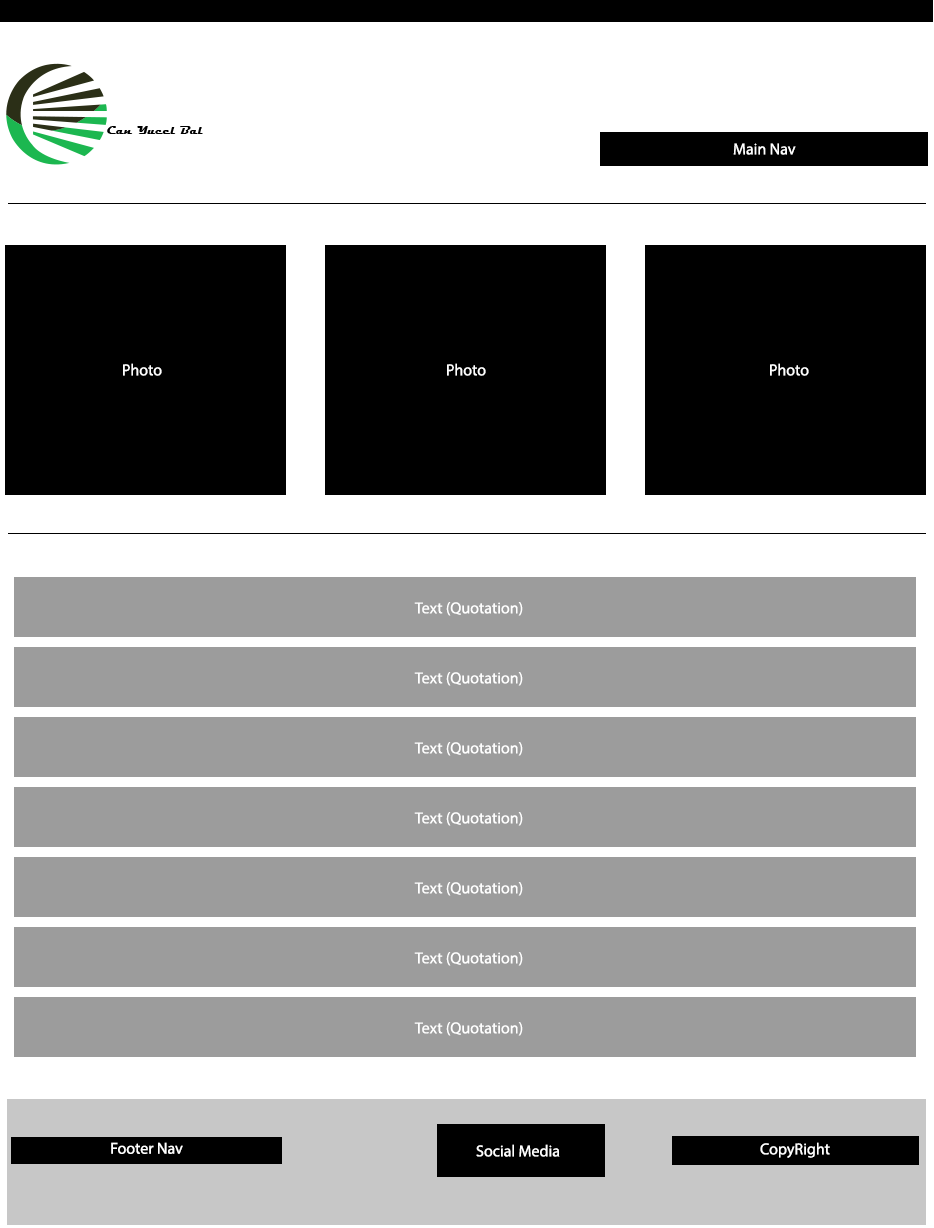
<style>
.page{position:relative;width:934px;height:1228px;background:#ffffff}
.page>*{position:absolute;margin:0}
.t1{font:12px "MyriadPro-Regular";color:#ffffff}
</style>
<div class="page">
<p class="t1" style="left:733px;top:143px;width:63px;height:12px">Main Nav</p>
<p class="t1" style="left:123px;top:363px;width:39px;height:13px">Photo</p>
<p class="t1" style="left:447px;top:363px;width:39px;height:13px">Photo</p>
<p class="t1" style="left:770px;top:363px;width:39px;height:13px">Photo</p>
<p class="t1" style="left:414px;top:602px;width:109px;height:14px">Text (Quotation)</p>
<p class="t1" style="left:414px;top:672px;width:109px;height:14px">Text (Quotation)</p>
<p class="t1" style="left:414px;top:742px;width:109px;height:14px">Text (Quotation)</p>
<p class="t1" style="left:414px;top:812px;width:109px;height:14px">Text (Quotation)</p>
<p class="t1" style="left:414px;top:882px;width:109px;height:14px">Text (Quotation)</p>
<p class="t1" style="left:414px;top:952px;width:109px;height:14px">Text (Quotation)</p>
<p class="t1" style="left:414px;top:1022px;width:109px;height:14px">Text (Quotation)</p>
<p class="t1" style="left:111px;top:1142px;width:72px;height:12px">Footer Nav</p>
<p class="t1" style="left:476px;top:1144px;width:84px;height:13px">Social Media</p>
<p class="t1" style="left:760px;top:1142px;width:70px;height:16px">CopyRight</p>
</div>
